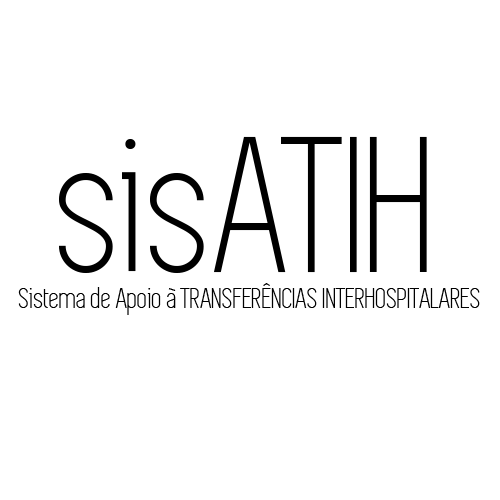
<style>
.page{position:relative;width:500px;height:500px;background:#ffffff}
.page>*{position:absolute;margin:0}
.t1{font:30px "Simplifica";color:#000000}
.t2{font:200px "Simplifica";color:#000000}
</style>
<div class="page">
<p class="t1" style="left:18px;top:136px;width:462px;height:179px;text-align:center"><span class="t2">sisATIH<br></span>Sistema de Apoio à TRANSFERÊNCIAS INTERHOSPITALARES</p>
</div>
